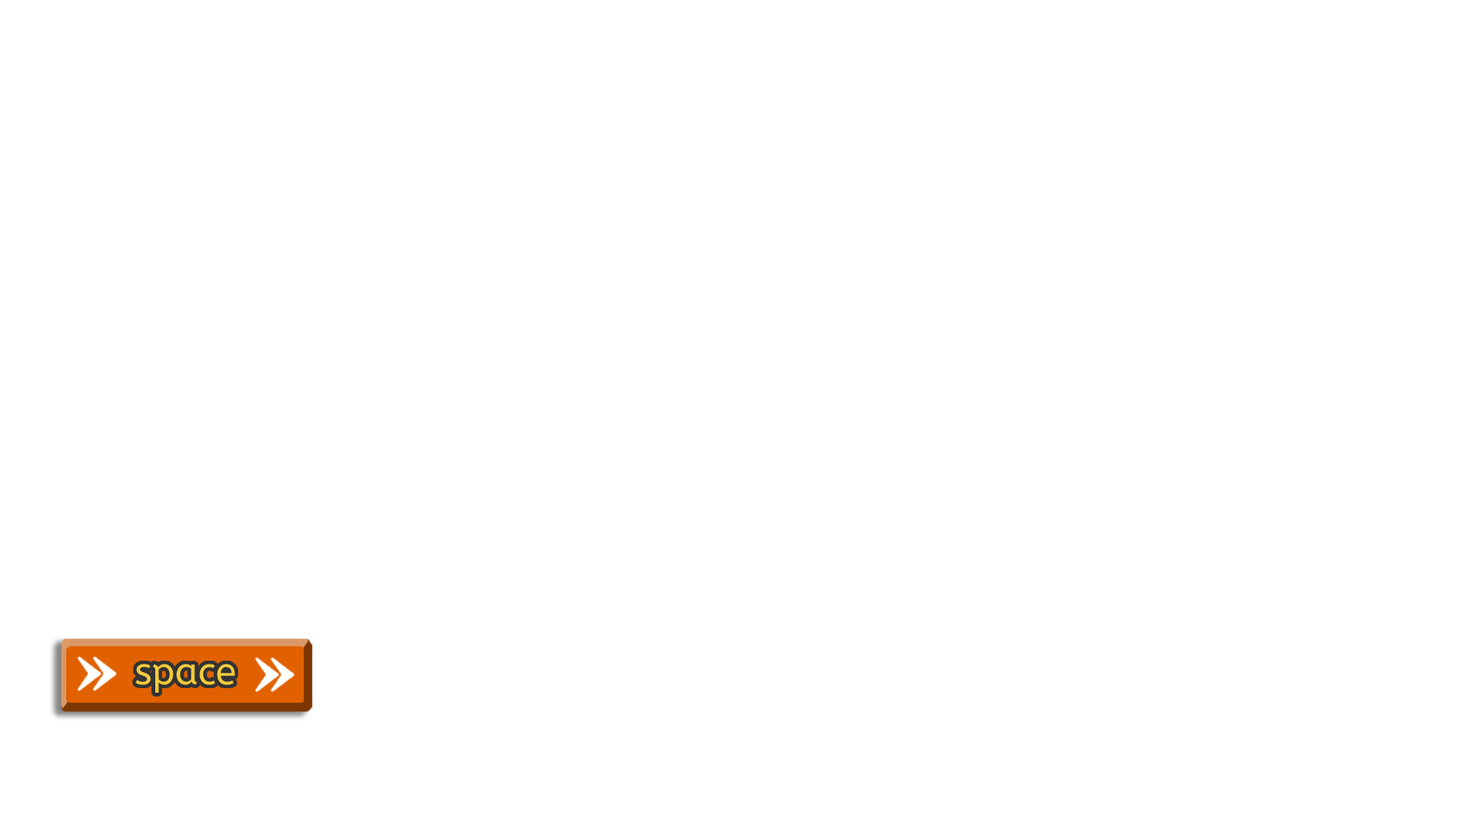
<style>
.page{position:relative;width:1461px;height:816px;background:#ffffff}
.page>*{position:absolute;margin:0}
.t1{font:38.1px "ABeeZee-Regular";color:#f6cb3b}
</style>
<div class="page">
<p class="t1" style="left:135px;top:664px;width:100px;height:29px">space</p>
</div>
